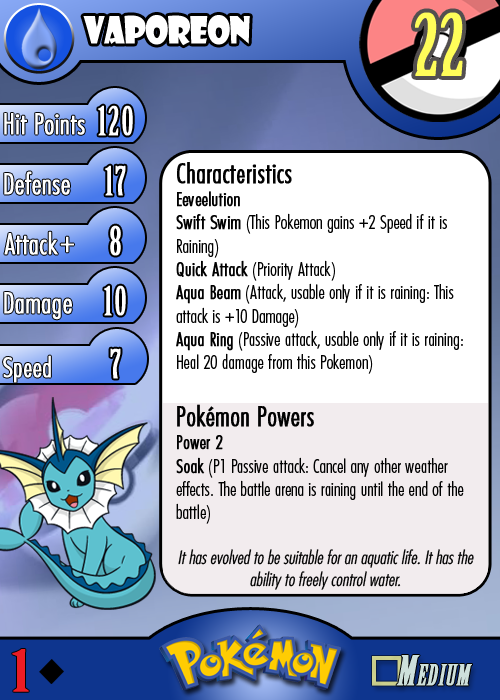
<style>
.page{position:relative;width:500px;height:700px;background:#ffffff}
.page>*{position:absolute;margin:0}
.t1{font:36.7px "ShowcardGothic-Reg";letter-spacing:-0.025em;color:#ffffff;scale:0.91 1}
.t2{font:83.3px "BirchStd";letter-spacing:0.025em;color:#fffd59;font-weight:bold}
.t3{font:27.8px "Futura-CondensedLight";color:#ffffff;font-weight:bold}
.t4{font:38.9px "BirchStd";letter-spacing:0.035em;color:#ffffff;font-weight:bold}
.t5{font:19.4px "FuturaCondensedBQ-Light";color:#010101}
.t6{font:27.8px "FuturaCondensedBQ-Light";color:#010101;font-weight:bold}
.t7{font:19.4px "FuturaCondensedBQ-Light";color:#010101;font-weight:bold}
.t8{font:30.6px "Futura-CondensedLight";color:#ffffff;font-weight:bold}
.t9{font:27.8px "FuturaCondensedBQ-Light";color:#ffffff;font-weight:bold}
.t10{font:18.1px "Futura-CondensedLight";color:#010101;font-style:italic}
.t11{font:55.6px "BirchStd";color:#ed1c24;font-weight:bold;scale:1.5 1}
</style>
<div class="page">
<p class="t1" style="left:83px;top:15px;width:167px;height:31px">vaporeon</p>
<p class="t2" style="left:415px;top:12px;width:48px;height:64px">22</p>
<p class="t3" style="left:4px;top:113px;width:81px;height:22px">Hit Points</p>
<p class="t4" style="left:98px;top:105px;width:35px;height:31px">120</p>
<p class="t3" style="left:4px;top:171px;width:66px;height:24px">Defense</p>
<p class="t4" style="left:105px;top:165px;width:21px;height:31px">17</p>
<p class="t5" style="left:176px;top:162px;width:288px;height:362px"><span class="t6">Characteristics<br></span><span class="t7">Eeveelution<br>Swift Swim</span> (This Pokemon gains +2 Speed if it is Raining)<br><span class="t7">Quick Attack </span>(Priority Attack)<br><span class="t7">Aqua Beam</span> (Attack, usable only if it is raining: This attack is +10 Damage)<br><span class="t7">Aqua Ring</span> (Passive attack, usable only if it is raining: Heal 20 damage from this Pokemon)<br><br><span class="t6">Pokémon Powers<br></span><span class="t7">Power 2<br>Soak</span> (P1 Passive attack: Cancel any other weather effects. The battle arena is raining until the end of the battle)</p>
<p class="t3" style="left:4px;top:231px;width:54px;height:24px">Attack</p>
<p class="t4" style="left:110px;top:225px;width:11px;height:31px">8</p>
<p class="t8" style="left:60px;top:236px;width:14px;height:17px">+</p>
<p class="t3" style="left:4px;top:292px;width:68px;height:28px">Damage</p>
<p class="t4" style="left:104px;top:285px;width:22px;height:31px">10</p>
<p class="t4" style="left:110px;top:348px;width:11px;height:31px">7</p>
<p class="t9" style="left:3px;top:355px;width:48px;height:28px">Speed</p>
<p class="t10" style="left:178px;top:549px;width:296px;height:41px;text-align:center">It has evolved to be suitable for an aquatic life. It has the ability to freely control water.</p>
<p class="t11" style="left:12px;top:649px;width:17px;height:43px">1</p>
</div>
